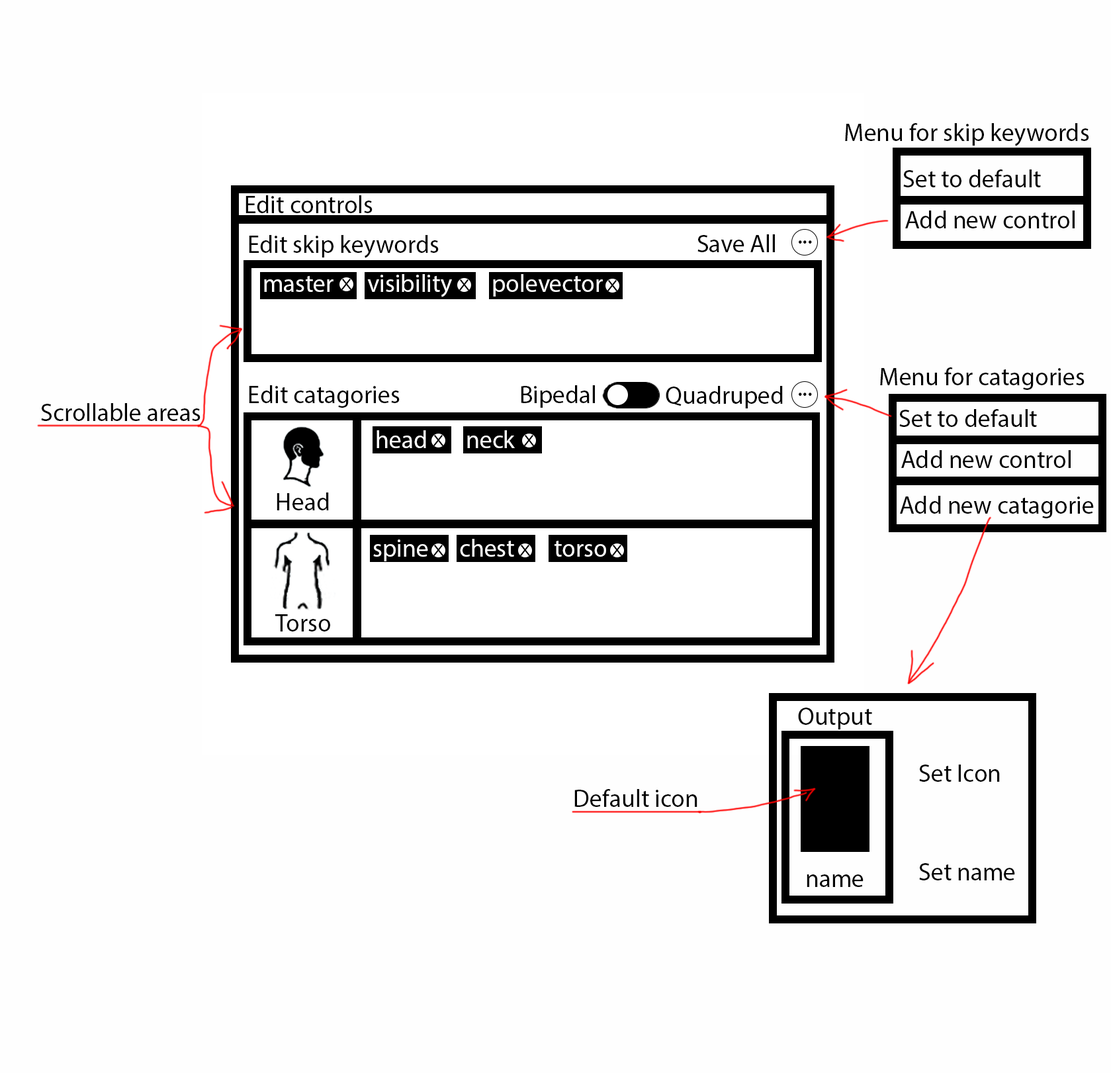
<style>
.page{position:relative;width:1111px;height:1073px;background:#fefefe}
.page>*{position:absolute;margin:0}
.t1{font:24.8px "MyriadPro-Regular";color:#000000}
.t2{font:24.8px "MyriadPro-Regular";color:#ffffff}
</style>
<div class="page">
<p class="t1" style="left:845px;top:123px;width:245px;height:23px">Menu for skip keywords</p>
<p class="t1" style="left:904px;top:169px;width:137px;height:18px">Set to default</p>
<p class="t1" style="left:246px;top:195px;width:127px;height:18px">Edit controls</p>
<p class="t1" style="left:905px;top:210px;width:170px;height:18px">Add new control</p>
<p class="t1" style="left:249px;top:235px;width:190px;height:23px">Edit skip keywords</p>
<p class="t1" style="left:698px;top:234px;width:77px;height:18px">Save All</p>
<p class="t1" style="left:799px;top:240px;width:13px;height:4px">...</p>
<p class="t2" style="left:264px;top:275px;width:70px;height:17px">master</p>
<p class="t2" style="left:367px;top:274px;width:85px;height:23px">visibility</p>
<p class="t2" style="left:493px;top:274px;width:110px;height:23px">polevector</p>
<p class="t1" style="left:880px;top:367px;width:205px;height:23px">Menu for catagories</p>
<p class="t1" style="left:249px;top:385px;width:151px;height:23px">Edit catagories</p>
<p class="t1" style="left:521px;top:385px;width:74px;height:23px">Bipedal</p>
<p class="t1" style="left:666px;top:386px;width:117px;height:22px">Quadruped</p>
<p class="t1" style="left:799px;top:393px;width:13px;height:3px">...</p>
<p class="t1" style="left:41px;top:403px;width:160px;height:18px">Scrollable areas</p>
<p class="t1" style="left:900px;top:409px;width:137px;height:18px">Set to default</p>
<p class="t2" style="left:377px;top:430px;width:49px;height:18px">head</p>
<p class="t2" style="left:467px;top:430px;width:48px;height:18px">neck</p>
<p class="t1" style="left:902px;top:450px;width:169px;height:18px">Add new control</p>
<p class="t1" style="left:277px;top:492px;width:52px;height:18px">Head</p>
<p class="t1" style="left:900px;top:496px;width:194px;height:22px">Add new catagorie</p>
<p class="t2" style="left:373px;top:539px;width:55px;height:22px">spine</p>
<p class="t2" style="left:460px;top:539px;width:54px;height:18px">chest</p>
<p class="t2" style="left:555px;top:540px;width:51px;height:17px">torso</p>
<p class="t1" style="left:275px;top:614px;width:55px;height:17px">Torso</p>
<p class="t1" style="left:798px;top:708px;width:74px;height:21px">Output</p>
<p class="t1" style="left:919px;top:765px;width:81px;height:17px">Set Icon</p>
<p class="t1" style="left:575px;top:789px;width:123px;height:18px">Default icon</p>
<p class="t1" style="left:919px;top:863px;width:96px;height:17px">Set name</p>
<p class="t1" style="left:807px;top:874px;width:57px;height:13px">name</p>
</div>
